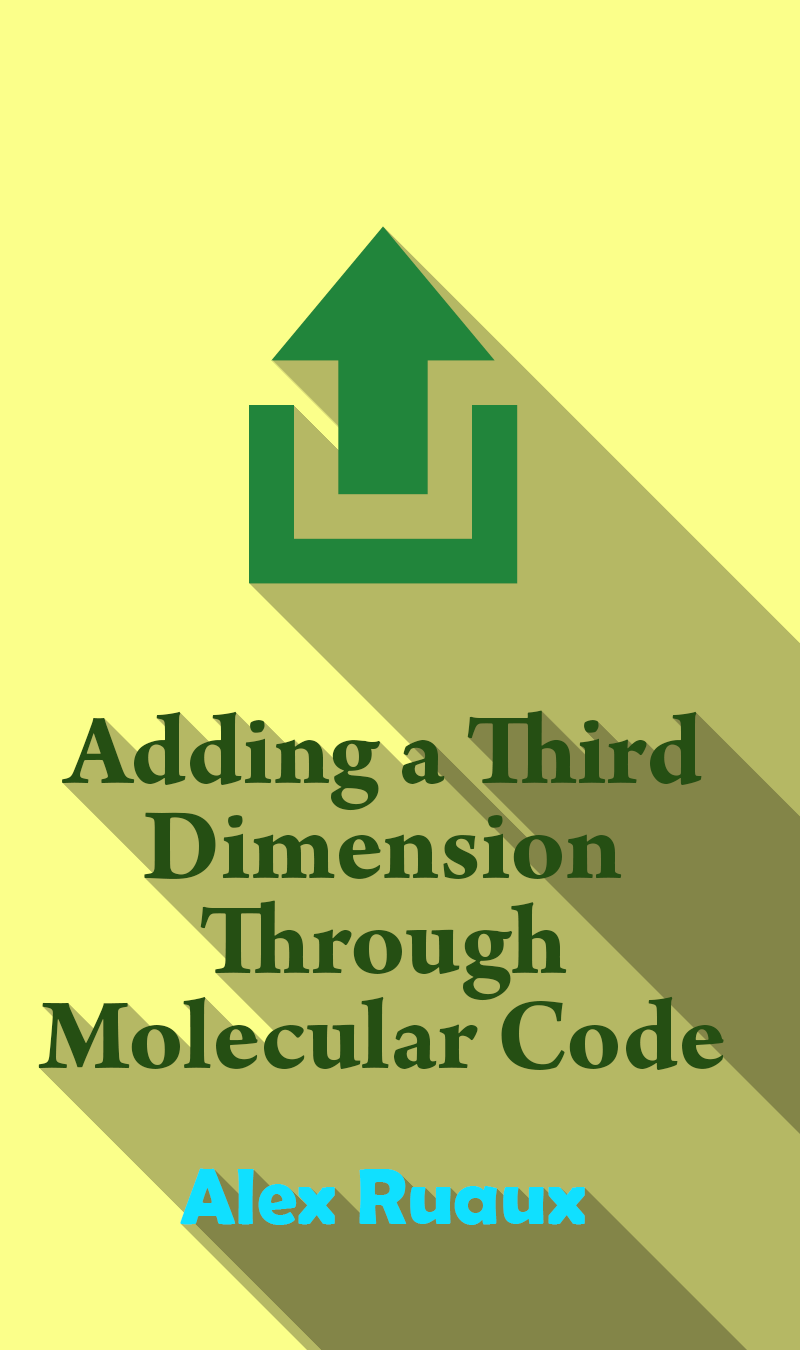
<style>
.page{position:relative;width:800px;height:1350px;background:#fbff8a}
.page>*{position:absolute;margin:0}
.t1{font:107px/95px "ArnoPro-Bold";color:#254f13}
.t2{font:80px "BerlinSansFBDemi-Bold";color:#10e0ff}
</style>
<div class="page">
<p class="t1" style="left:38px;top:710px;width:686px;height:360px;text-align:center">Adding a Third Dimension Through Molecular Code</p>
<p class="t2" style="left:180px;top:1168px;width:405px;height:57px">Alex Ruaux</p>
</div>
